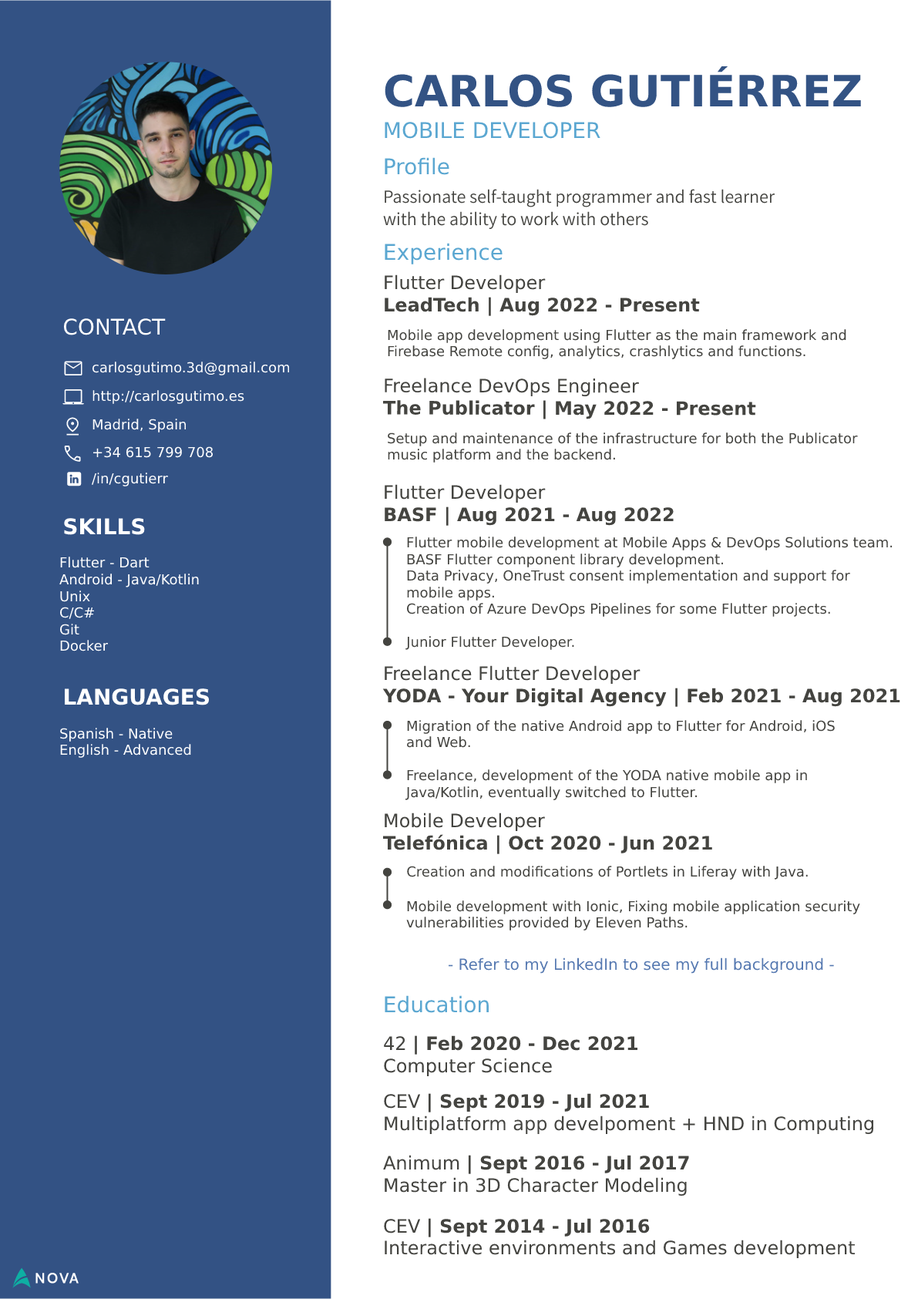
<style>
.page{position:relative;width:918px;height:1299px;background:#ffffff}
.page>*{position:absolute;margin:0}
.t1{font:43.2px "Mont-Bold";color:#335384}
.t2{font:21.6px "Mont-Regular";color:#5ba7d1}
.t3{font:18.5px/16.7px "Assistant-Regular";color:#444440}
.t4{font:18.5px/22.2px "Assistant-Regular";color:#444440}
.t5{font:18.5px/22.2px "Mont-SemiBold";color:#444440}
.t6{font:18.5px/16.7px "Mont-Heavy";color:#444440}
.t7{font:21.6px "Mont-Book";color:#ffffff}
.t8{font:13.9px/16.7px "Mont-Regular";color:#444440}
.t9{font:13.9px "Mont-Regular";color:#ffffff}
.t10{font:18.5px/22.2px "Mont-Heavy";color:#444440}
.t11{font:21.6px "Mont-Bold";color:#ffffff}
.t12{font:13.9px/22.2px "Mont-Regular";color:#444440}
.t13{font:13.9px/16.7px "Mont-Regular";color:#ffffff}
.t14{font:13.9px "Mont-Regular";color:#444440}
.t15{font:15.4px "Mont-Heavy";color:#5679b1}
.t16{font:18.5px/22.2px "Mont-Regular";color:#444440}
.t17{font:18.5px/16.7px "Mont-SemiBold";color:#444440}
</style>
<div class="page">
<p class="t1" style="left:385px;top:66px;width:476px;height:41px">CARLOS GUTIÉRREZ</p>
<p class="t2" style="left:385px;top:122px;width:215px;height:17px">MOBILE DEVELOPER</p>
<p class="t2" style="left:385px;top:157px;width:64px;height:18px">Profile</p>
<p class="t3" style="left:383px;top:189px;width:392px;height:41px">Passionate self-taught programmer and fast learner<span class="t4"><br>with the ability to work with others</span></p>
<p class="t2" style="left:385px;top:243px;width:118px;height:21px">Experience</p>
<p class="t5" style="left:385px;top:274px;width:315px;height:42px"><span class="t6">Flutter Developer<br></span>LeadTech | Aug 2022 - Present</p>
<p class="t7" style="left:63px;top:318px;width:103px;height:17px">CONTACT</p>
<p class="t8" style="left:388px;top:329px;width:458px;height:30px">Mobile app development using Flutter as the main framework and Firebase Remote config, analytics, crashlytics and functions.</p>
<p class="t9" style="left:92px;top:362px;width:198px;height:13px">carlosgutimo.3d@gmail.com</p>
<p class="t5" style="left:383px;top:378px;width:373px;height:41px"><span class="t6">Freelance DevOps Engineer<br></span>The Publicator | May 2022 - Present</p>
<p class="t9" style="left:93px;top:390px;width:151px;height:14px">http://carlosgutimo.es</p>
<p class="t9" style="left:93px;top:419px;width:94px;height:13px">Madrid, Spain</p>
<p class="t8" style="left:388px;top:432px;width:470px;height:31px">Setup and maintenance of the infrastructure for both the Publicator music platform and the backend.</p>
<p class="t9" style="left:93px;top:446px;width:120px;height:12px">+34 615 799 708</p>
<p class="t9" style="left:91px;top:473px;width:77px;height:13px">/in/cgutierr</p>
<p class="t5" style="left:385px;top:484px;width:289px;height:42px"><span class="t10">Flutter Developer</span><br>BASF | Aug 2021 - Aug 2022</p>
<p class="t11" style="left:64px;top:518px;width:81px;height:17px">SKILLS</p>
<p class="t8" style="left:407px;top:537px;width:486px;height:80px"><span class="t12">Flutter mobile development at Mobile Apps &amp; DevOps Solutions team.</span><br>BASF Flutter component library development.<br>Data Privacy, OneTrust consent implementation and support for<br>mobile apps.<br>Creation of Azure DevOps Pipelines for some Flutter projects.</p>
<p class="t13" style="left:59px;top:557px;width:140px;height:94px"><span class="t9">Flutter - Dart</span><br>Android - Java/Kotlin<br>Unix<br>C/C#<br>Git<br>Docker</p>
<p class="t14" style="left:405px;top:636px;width:169px;height:14px">Junior Flutter Developer.</p>
<p class="t5" style="left:382px;top:665px;width:518px;height:42px"><span class="t10">Freelance Flutter Developer</span><br>YODA - Your Digital Agency | Feb 2021 - Aug 2021</p>
<p class="t11" style="left:64px;top:688px;width:146px;height:17px">LANGUAGES</p>
<p class="t12" style="left:407px;top:720px;width:428px;height:28px">Migration of the native Android app to Flutter for Android, iOS<span class="t8"><br>and Web.</span></p>
<p class="t13" style="left:60px;top:728px;width:131px;height:30px">Spanish - Native<br>English - Advanced</p>
<p class="t8" style="left:405px;top:769px;width:402px;height:31px">Freelance, development of the YODA native mobile app in<br>Java/Kotlin, eventually switched to Flutter.</p>
<p class="t5" style="left:383px;top:812px;width:329px;height:42px"><span class="t6">Mobile Developer</span><br>Telefónica | Oct 2020 - Jun 2021</p>
<p class="t14" style="left:407px;top:866px;width:401px;height:14px">Creation and modifications of Portlets in Liferay with Java.</p>
<p class="t12" style="left:406px;top:900px;width:454px;height:30px">Mobile development with Ionic, Fixing mobile application security<span class="t8"><br>vulnerabilities provided by Eleven Paths.</span></p>
<p class="t15" style="left:448px;top:957px;width:386px;height:17px">- Refer to my LinkedIn to see my full background -</p>
<p class="t2" style="left:385px;top:995px;width:104px;height:18px">Education</p>
<p class="t5" style="left:384px;top:1035px;width:253px;height:41px"><span class="t10">42 </span>| Feb 2020 - Dec 2021<span class="t16"><br>Computer Science</span></p>
<p class="t16" style="left:384px;top:1093px;width:489px;height:41px"><span class="t6">CEV </span><span class="t17">| Sept 2019 - Jul 2021</span><br>Multiplatform app develpoment + HND in Computing</p>
<p class="t16" style="left:383px;top:1155px;width:306px;height:41px"><span class="t10">Animum </span><span class="t5">| Sept 2016 - Jul 2017</span><br>Master in 3D Character Modeling</p>
<p class="t16" style="left:384px;top:1218px;width:471px;height:40px"><span class="t10">CEV </span><span class="t5">| Sept 2014 - Jul 2016</span><br>Interactive environments and Games development</p>
</div>
